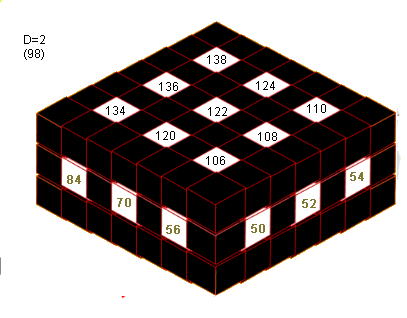
<style>
.page{position:relative;width:407px;height:318px;background:#ffffff}
.page>*{position:absolute;margin:0}
.t1{font:12px "ArialMT";color:#000000}
.t2{font:12px "ArialMT";color:#817931;font-weight:bold}
</style>
<div class="page">
<p class="t1" style="left:24px;top:35px;width:21px;height:25px;text-align:center">D=2<br>(98)</p>
<p class="t1" style="left:207px;top:55px;width:19px;height:9px">138</p>
<p class="t1" style="left:159px;top:82px;width:19px;height:9px">136</p>
<p class="t1" style="left:256px;top:81px;width:19px;height:9px">124</p>
<p class="t1" style="left:106px;top:106px;width:19px;height:9px">134</p>
<p class="t1" style="left:208px;top:107px;width:19px;height:9px">122</p>
<p class="t1" style="left:307px;top:104px;width:19px;height:9px">110</p>
<p class="t1" style="left:156px;top:131px;width:19px;height:9px">120</p>
<p class="t1" style="left:258px;top:132px;width:19px;height:9px">108</p>
<p class="t1" style="left:206px;top:156px;width:19px;height:9px">106</p>
<p class="t2" style="left:350px;top:172px;width:14px;height:9px">54</p>
<p class="t2" style="left:67px;top:175px;width:14px;height:9px">84</p>
<p class="t2" style="left:117px;top:198px;width:14px;height:9px">70</p>
<p class="t2" style="left:302px;top:199px;width:14px;height:9px">52</p>
<p class="t2" style="left:166px;top:225px;width:14px;height:9px">56</p>
<p class="t2" style="left:251px;top:224px;width:14px;height:9px">50</p>
</div>
